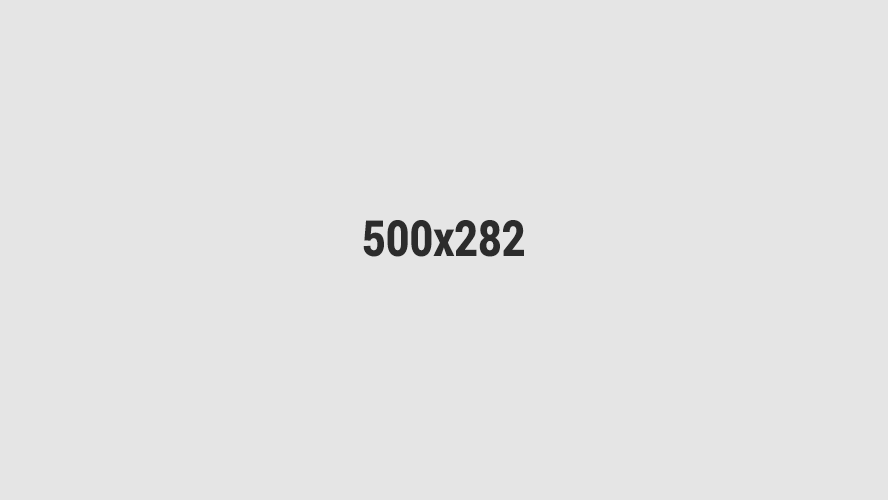
<style>
.page{position:relative;width:888px;height:500px;background:#e5e5e5}
.page>*{position:absolute;margin:0}
.t1{font:50px "Roboto-Black";color:#2c2c2c;scale:0.82 1}
</style>
<div class="page">
<p class="t1" style="left:363px;top:220px;width:161px;height:37px">500x282</p>
</div>
